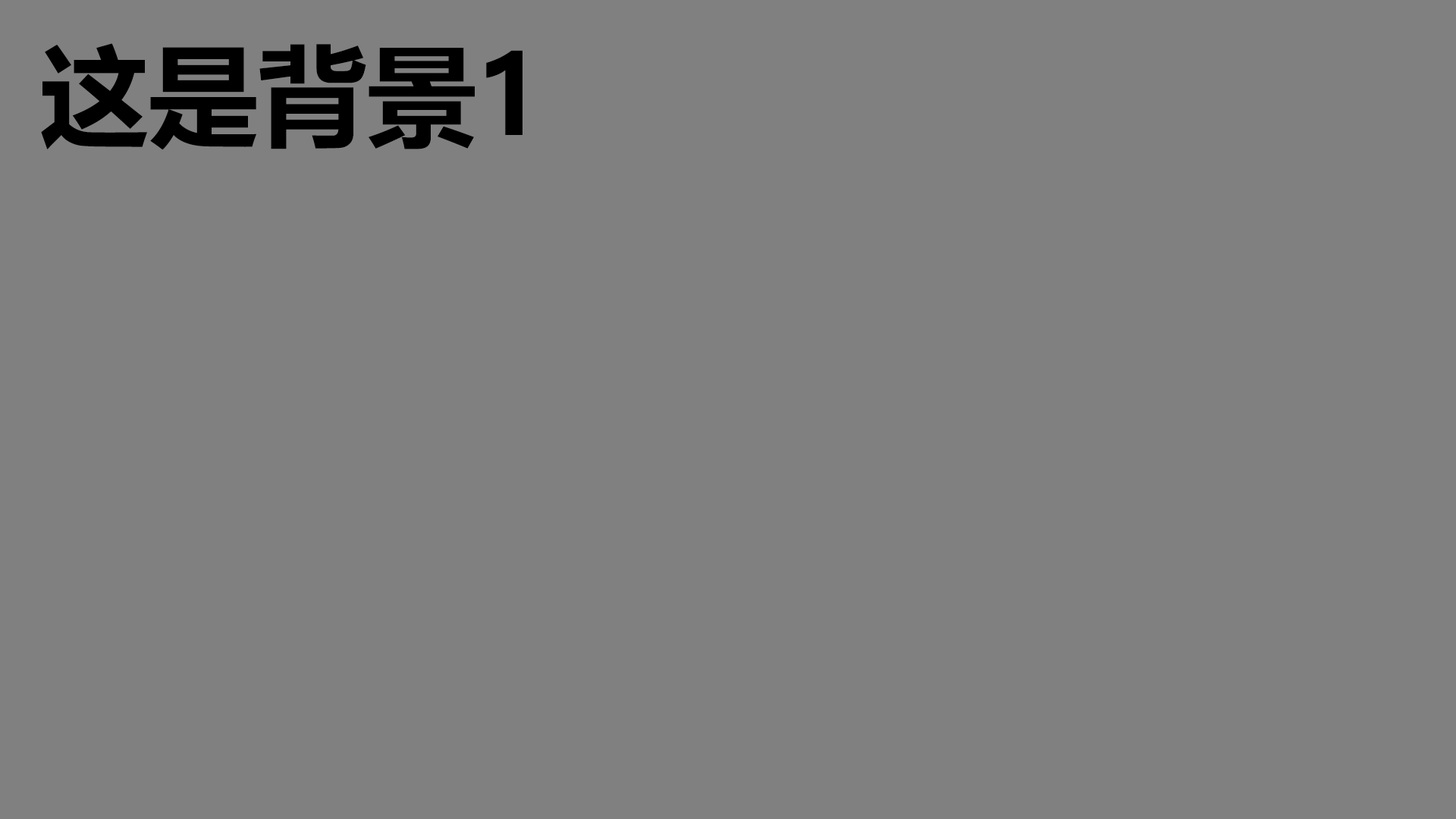
<style>
.page{position:relative;width:1456px;height:819px;background:#808080}
.page>*{position:absolute;margin:0}
.t1{font:109.2px "MicrosoftYaHei-Bold";color:#808080}
.t2{font:109.2px "MicrosoftYaHei-Bold";color:#000000}
</style>
<div class="page">
<p class="t1" style="left:41px;top:43px;width:1219px;height:119px"><span class="t2">这是背景1</span>Lorem Ipsum</p>
</div>
